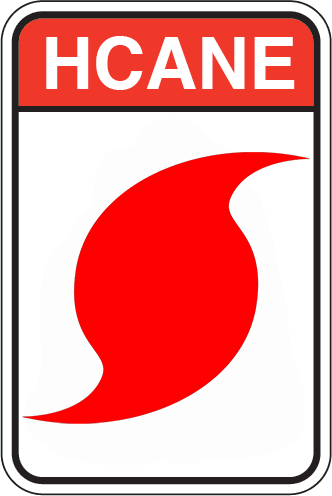
<style>
.page{position:relative;width:332px;height:496px;background:#ffffff}
.page>*{position:absolute;margin:0}
.t1{font:72px "Helvetica-Bold";color:#ffffff}
</style>
<div class="page">
<p class="t1" style="left:46px;top:36px;width:249px;height:54px">HCANE</p>
</div>
